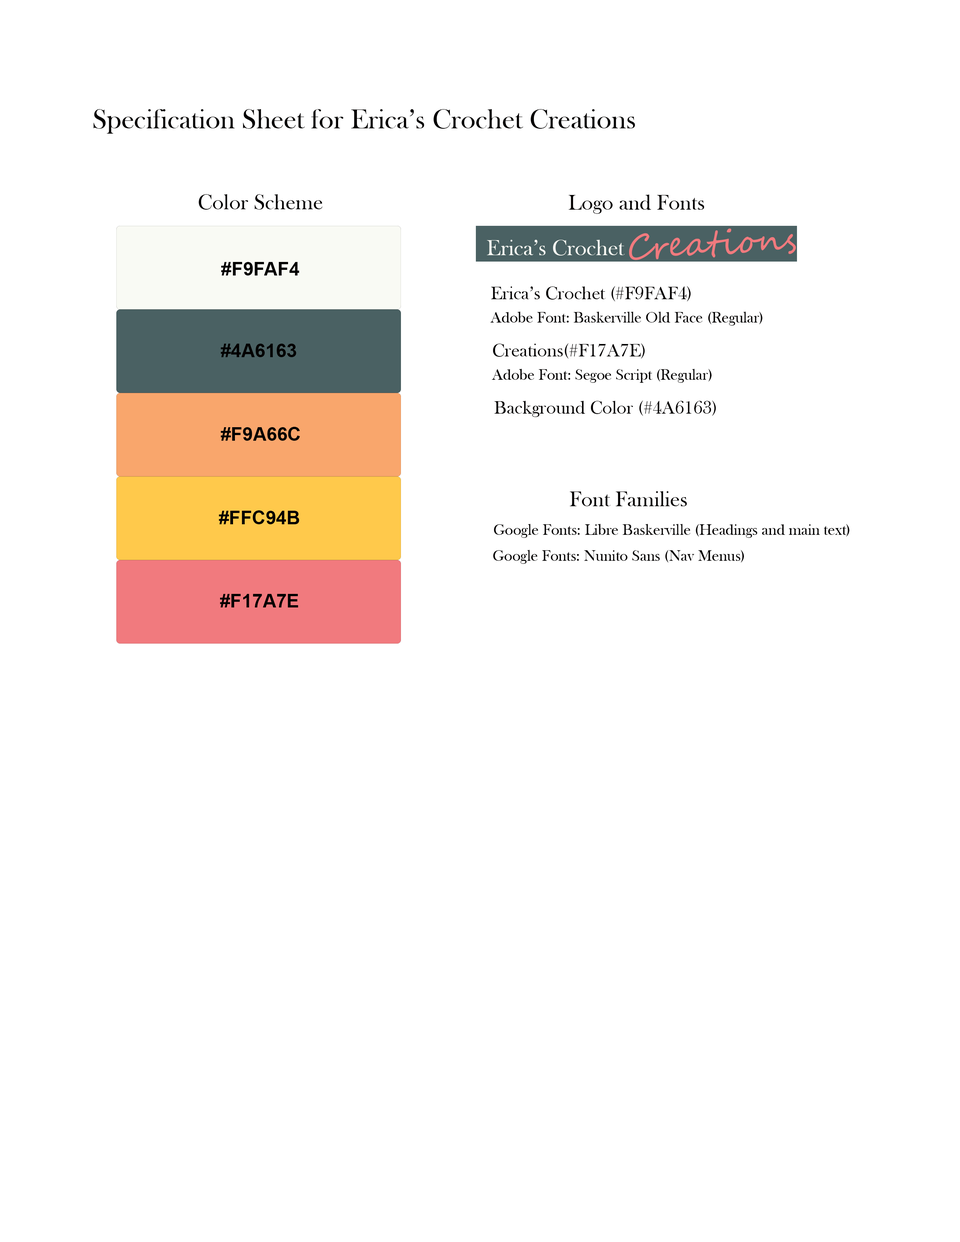
<style>
.page{position:relative;width:960px;height:1242px;background:#ffffff}
.page>*{position:absolute;margin:0}
.t1{font:28.2px "BaskOldFace";color:#020000}
.t2{font:22px "BaskOldFace";color:#020000}
.t3{font:18.8px "Arial-BoldMT";color:#020000}
.t4{font:18.8px "BaskOldFace";color:#020000}
.t5{font:15.7px "BaskOldFace";color:#020000}
</style>
<div class="page">
<p class="t1" style="left:93px;top:109px;width:542px;height:25px">Specification Sheet for Erica’s Crochet Creations</p>
<p class="t2" style="left:199px;top:194px;width:124px;height:16px">Color Scheme</p>
<p class="t2" style="left:568px;top:195px;width:136px;height:19px">Logo and Fonts</p>
<p class="t3" style="left:221px;top:262px;width:78px;height:14px">#F9FAF4</p>
<p class="t4" style="left:491px;top:286px;width:200px;height:16px">Erica’s Crochet (#F9FAF4)</p>
<p class="t5" style="left:490px;top:312px;width:272px;height:14px">Adobe Font: Baskerville Old Face (Regular)</p>
<p class="t3" style="left:221px;top:344px;width:75px;height:13px">#4A6163</p>
<p class="t4" style="left:493px;top:343px;width:152px;height:16px">Creations(#F17A7E)</p>
<p class="t5" style="left:492px;top:369px;width:219px;height:14px">Adobe Font: Segoe Script (Regular)</p>
<p class="t4" style="left:494px;top:401px;width:222px;height:16px">Background Color (#4A6163)</p>
<p class="t3" style="left:221px;top:427px;width:79px;height:14px">#F9A66C</p>
<p class="t2" style="left:570px;top:491px;width:117px;height:15px">Font Families</p>
<p class="t3" style="left:219px;top:510px;width:80px;height:14px">#FFC94B</p>
<p class="t5" style="left:494px;top:524px;width:355px;height:14px">Google Fonts: Libre Baskerville (Headings and main text)</p>
<p class="t5" style="left:493px;top:550px;width:251px;height:14px">Google Fonts: Nunito Sans (Nav Menus)</p>
<p class="t3" style="left:220px;top:594px;width:78px;height:14px">#F17A7E</p>
</div>
